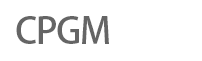
<style>
.page{position:relative;width:202px;height:61px;background:#ffffff}
.page>*{position:absolute;margin:0}
.t1{font:36px "AdobeHeitiStd-Regular";letter-spacing:-0.025em;color:#656565;text-transform:uppercase}
</style>
<div class="page">
<p class="t1" style="left:16px;top:16px;width:93px;height:28px">CPGM</p>
</div>
